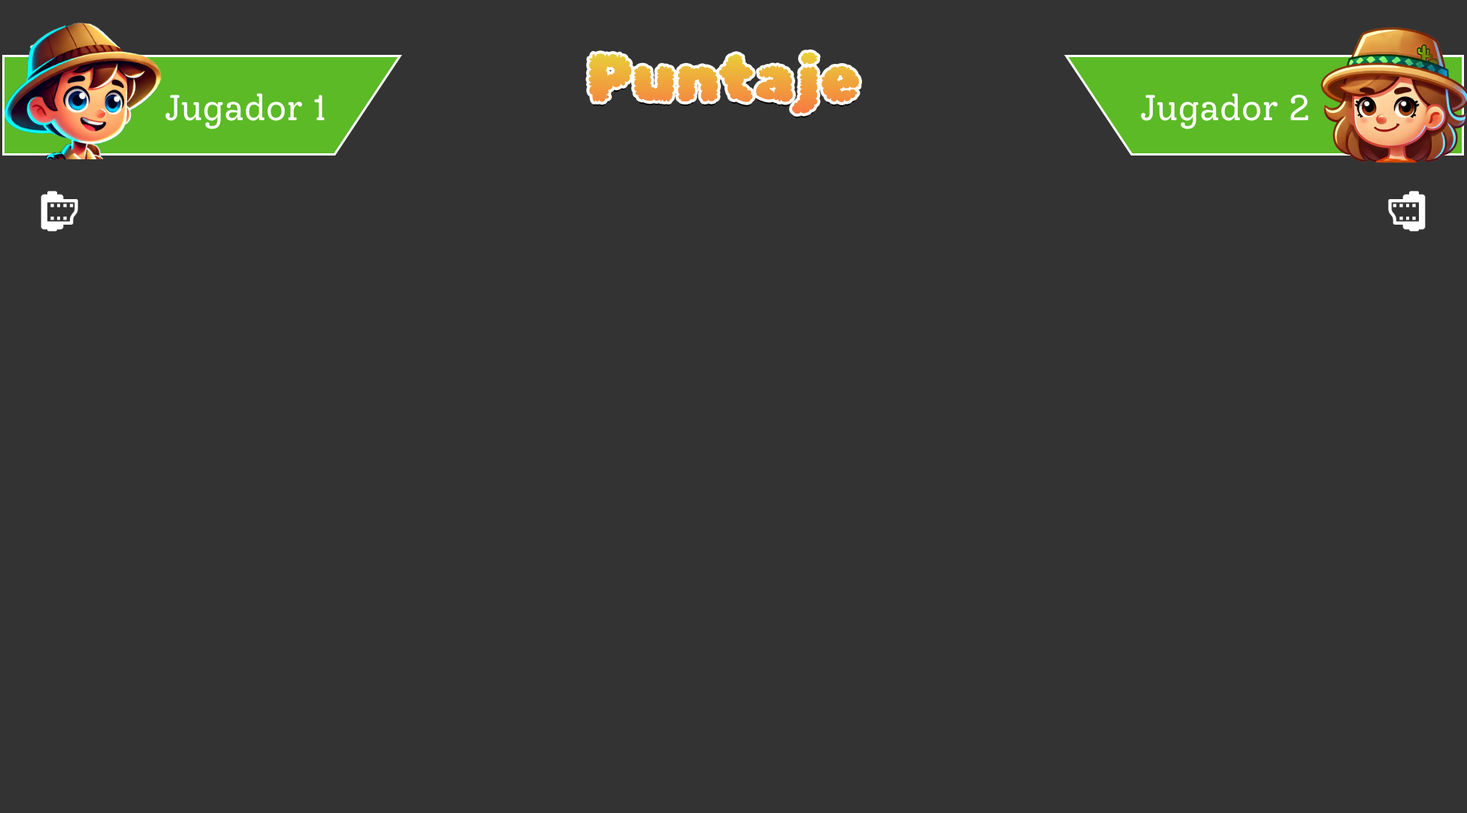
<style>
.page{position:relative;width:1467px;height:813px;background:#333333}
.page>*{position:absolute;margin:0}
.t1{font:64.6px "RubikBubbles-Regular";color:#f0a63c}
.t2{font:36.1px "Solway-Regular";color:#ffffff}
</style>
<div class="page">
<p class="t1" style="left:588px;top:52px;width:272px;height:62px">Puntaje</p>
<p class="t2" style="left:165px;top:93px;width:160px;height:36px">Jugador 1</p>
<p class="t2" style="left:1141px;top:93px;width:167px;height:36px">Jugador 2</p>
</div>
